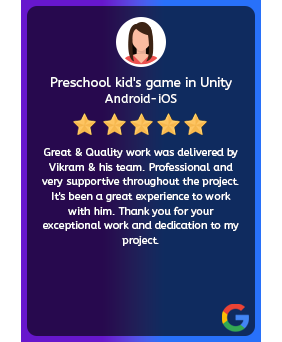
<style>
.page{position:relative;width:282px;height:342px;background:#0f2b5f}
.page>*{position:absolute;margin:0}
.t1{font:13.3px "ABeeZee-Regular";color:#ffffff}
.t2{font:12.1px "ABeeZee-Regular";color:#ffffff}
.t3{font:10.7px/14.7px "ABeeZee-Regular";color:#ffffff}
</style>
<div class="page">
<p class="t1" style="left:51px;top:77px;width:181px;height:13px">Preschool kid's game in Unity</p>
<p class="t2" style="left:105px;top:94px;width:72px;height:9px">Android-iOS</p>
<p class="t3" style="left:42px;top:148px;width:197px;height:98px;text-align:center">Great &amp; Quality work was delivered by Vikram &amp; his team. Professional and very supportive throughout the project. It's been a great experience to work with him. Thank you for your<br>exceptional work and dedication to my project.</p>
</div>
